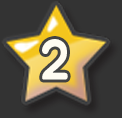
<style>
.page{position:relative;width:122px;height:118px;background:#333333}
.page>*{position:absolute;margin:0}
.t1{font:56.4px "BMJUA";color:#fffcf2;scale:0.9 1}
</style>
<div class="page">
<p class="t1" style="left:42px;top:39px;width:26px;height:41px">2</p>
</div>
